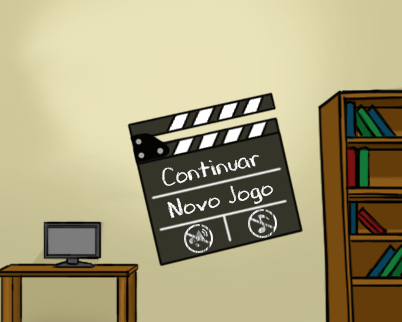
<style>
.page{position:relative;width:402px;height:322px}
.page>*{position:absolute;margin:0}
.t1{font:24px "DJBChalkItUp";color:#ffffff;scale:1.07 1}
.t2{font:22.6px "DJBChalkItUp";color:#ffffff;scale:1.18 1}
</style>
<div class="page">
<p class="t1" style="left:162px;top:154px;width:97px;height:32px;rotate:-13deg">Continuar</p>
<p class="t2" style="left:167px;top:185px;width:106px;height:33px;rotate:-13deg">Novo Jogo</p>
</div>
